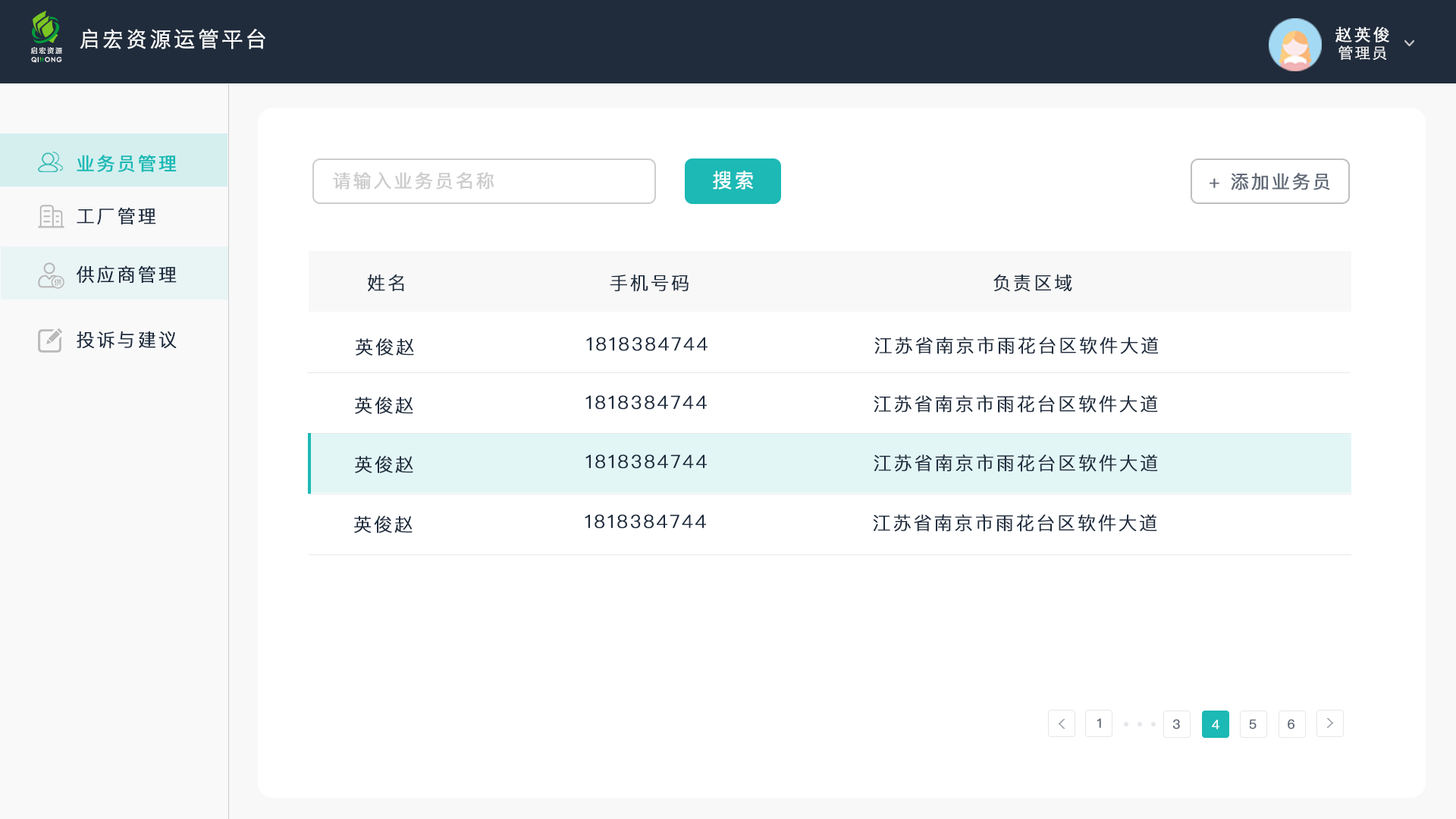
<style>
.page{position:relative;width:1456px;height:819px;background:#ffffff}
.page>*{position:absolute;margin:0}
.t1{font:21.2px "STHeitiSC-Light";letter-spacing:0.1em;color:#ffffff;font-weight:bold}
.t2{font:16.7px "STHeitiSC-Light";letter-spacing:0.1em;color:#ffffff;font-weight:bold}
.t3{font:7px "FZLTZHK--GBK1-0";letter-spacing:0.18em;color:#ffffff}
.t4{font:15.2px "STHeitiSC-Light";letter-spacing:0.1em;color:#ffffff;font-weight:bold}
.t5{font:6.3px "CenturyGothic";letter-spacing:0.1em;color:#ffffff;font-weight:bold}
.t6{font:18.2px "PingFangSC-Regular";letter-spacing:0.1em;color:#1cb9b5;font-weight:bold}
.t7{font:18.2px "PingFangSC-Regular";letter-spacing:0.1em;color:#cccccc;font-weight:bold}
.t8{font:19.7px "PingFangSC-Regular";letter-spacing:0.1em;color:#ffffff;font-weight:bold}
.t9{font:18.2px "PingFangSC-Regular";letter-spacing:0.1em;color:#626b78;font-weight:bold}
.t10{font:18.2px "PingFangSC-Light";letter-spacing:0.1em;color:#1e2c3e;font-weight:bold}
.t11{font:12.7px "PingFangSC-Regular";letter-spacing:0.1em;color:#626b78;font-weight:bold}
.t12{font:12.7px "PingFangSC-Regular";letter-spacing:0.1em;color:#ffffff;font-weight:bold}
</style>
<div class="page">
<p class="t1" style="left:80px;top:29px;width:185px;height:20px">启宏资源运管平台</p>
<p class="t2" style="left:1335px;top:27px;width:54px;height:15px">赵英俊</p>
<p class="t3" style="left:31px;top:47px;width:31px;height:7px">启宏资源</p>
<p class="t4" style="left:1338px;top:45px;width:49px;height:15px;opacity:0.9">管理员</p>
<p class="t5" style="left:31px;top:57px;width:31px;height:6px">QI  ONG</p>
<p class="t6" style="left:77px;top:155px;width:100px;height:17px">业务员管理</p>
<p class="t7" style="left:333px;top:172px;width:161px;height:18px">请输入业务员名称</p>
<p class="t8" style="left:713px;top:171px;width:40px;height:19px">搜索</p>
<p class="t9" style="left:1210px;top:173px;width:120px;height:17px">+ 添加业务员</p>
<p class="t10" style="left:77px;top:207px;width:79px;height:17px">工厂管理</p>
<p class="t10" style="left:77px;top:265px;width:100px;height:18px">供应商管理</p>
<p class="t10" style="left:368px;top:274px;width:36px;height:18px">姓名</p>
<p class="t10" style="left:610px;top:275px;width:79px;height:17px">手机号码</p>
<p class="t10" style="left:993px;top:275px;width:79px;height:17px">负责区域</p>
<p class="t10" style="left:77px;top:331px;width:100px;height:18px">投诉与建议</p>
<p class="t10" style="left:356px;top:338px;width:58px;height:18px">英俊赵</p>
<p class="t10" style="left:586px;top:337px;width:122px;height:14px">1818384744</p>
<p class="t10" style="left:874px;top:337px;width:285px;height:17px">江苏省南京市雨花台区软件大道</p>
<p class="t10" style="left:355px;top:397px;width:58px;height:17px">英俊赵</p>
<p class="t10" style="left:585px;top:395px;width:122px;height:14px">1818384744</p>
<p class="t10" style="left:874px;top:395px;width:284px;height:18px">江苏省南京市雨花台区软件大道</p>
<p class="t10" style="left:355px;top:456px;width:58px;height:17px">英俊赵</p>
<p class="t10" style="left:585px;top:454px;width:122px;height:15px">1818384744</p>
<p class="t10" style="left:874px;top:454px;width:284px;height:18px">江苏省南京市雨花台区软件大道</p>
<p class="t10" style="left:354px;top:516px;width:59px;height:17px">英俊赵</p>
<p class="t10" style="left:585px;top:514px;width:121px;height:15px">1818384744</p>
<p class="t10" style="left:873px;top:514px;width:284px;height:18px">江苏省南京市雨花台区软件大道</p>
<p class="t11" style="left:1097px;top:718px;width:4px;height:10px">1</p>
<p class="t11" style="left:1172px;top:719px;width:8px;height:11px">3</p>
<p class="t12" style="left:1212px;top:720px;width:7px;height:10px">4</p>
<p class="t11" style="left:1249px;top:719px;width:8px;height:11px">5</p>
<p class="t11" style="left:1288px;top:719px;width:6px;height:11px">6</p>
</div>
